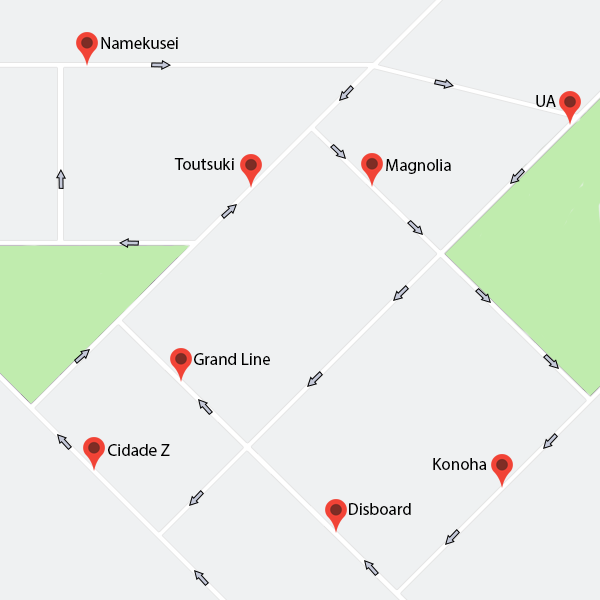
<style>
.page{position:relative;width:600px;height:600px;background:#eff1f2}
.page>*{position:absolute;margin:0}
.t1{font:17px "MyriadPro-Regular";color:#000000}
</style>
<div class="page">
<p class="t1" style="left:101px;top:37px;width:77px;height:12px">Namekusei</p>
<p class="t1" style="left:536px;top:95px;width:20px;height:12px">UA</p>
<p class="t1" style="left:174px;top:158px;width:60px;height:12px">Toutsuki</p>
<p class="t1" style="left:386px;top:159px;width:65px;height:15px">Magnolia</p>
<p class="t1" style="left:194px;top:353px;width:76px;height:12px">Grand Line</p>
<p class="t1" style="left:108px;top:444px;width:62px;height:12px">Cidade Z</p>
<p class="t1" style="left:433px;top:458px;width:54px;height:12px">Konoha</p>
<p class="t1" style="left:349px;top:503px;width:62px;height:12px">Disboard</p>
</div>
